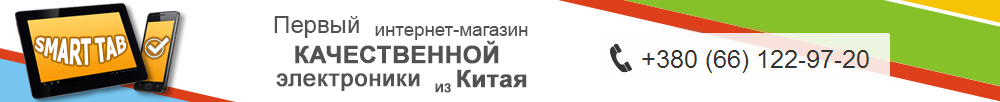
<style>
.page{position:relative;width:1000px;height:102px;background:#ffffff}
.page>*{position:absolute;margin:0}
.t1{font:24px "ArialMT";color:#525252}
.t2{font:18.7px "ArialMT";color:#525252}
.t3{font:15.6px "Tahoma-Bold";color:#ffffff}
.t4{font:24px "Arial-BoldMT";color:#525252;font-weight:bold}
.t5{font:24px "ArialMT";color:#525252;font-weight:bold}
.t6{font:16px "ArialMT";color:#525252;font-weight:bold}
</style>
<div class="page">
<p class="t1" style="left:274px;top:16px;width:85px;height:22px">Первый</p>
<p class="t2" style="left:375px;top:26px;width:153px;height:14px">интернет-магазин</p>
<p class="t3" style="left:35px;top:36px;width:92px;height:29px">SMART TAB</p>
<p class="t4" style="left:295px;top:40px;width:204px;height:24px">КАЧЕСТВЕННОЙ</p>
<p class="t5" style="left:276px;top:73px;width:144px;height:18px">электроники</p>
<p class="t4" style="left:457px;top:69px;width:70px;height:19px">Китая</p>
<p class="t6" style="left:435px;top:83px;width:16px;height:10px">из</p>
</div>
